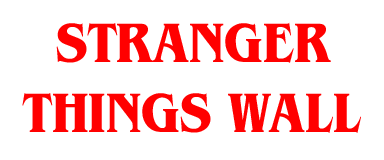
<style>
.page{position:relative;width:384px;height:160px;background:#ffffff}
.page>*{position:absolute;margin:0}
.t1{font:58.3px "BenguiatITCW01-BoldCn";color:#ff0000;text-transform:uppercase}
</style>
<div class="page">
<p class="t1" style="left:22px;top:22px;width:339px;height:111px;text-align:center">Stranger<br>THINGS WALL</p>
</div>
